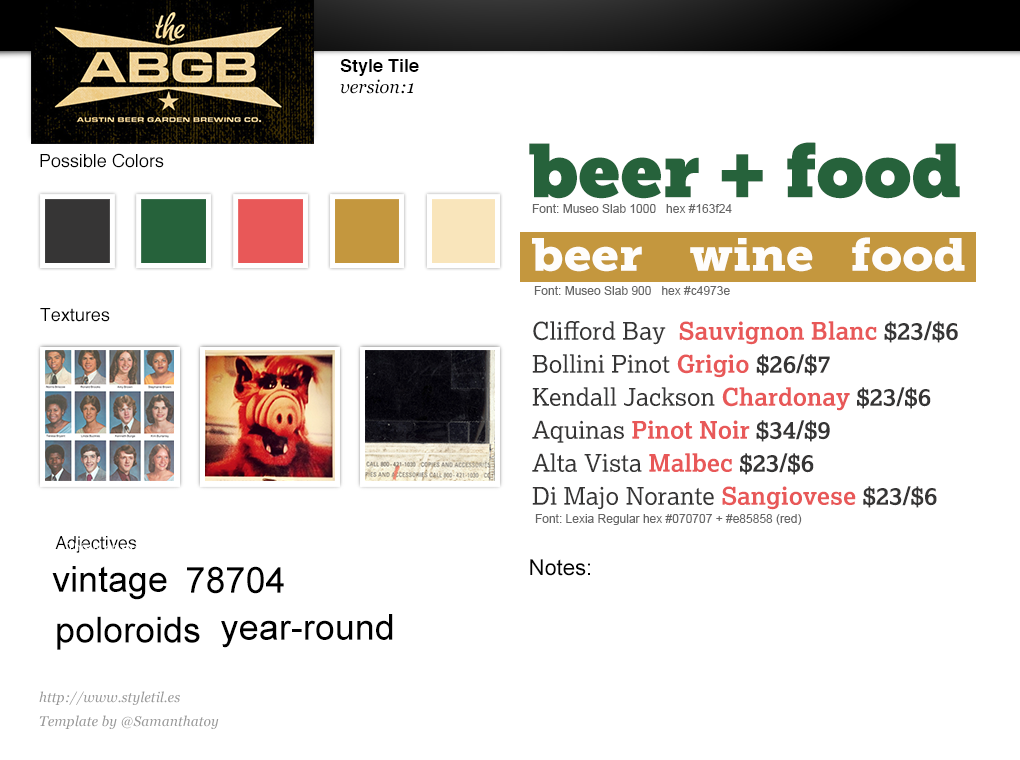
<style>
.page{position:relative;width:1020px;height:760px;background:#ffffff}
.page>*{position:absolute;margin:0}
.t1{font:18px "Helvetica-Bold";color:#000000}
.t2{font:18px "Georgia-Italic";color:#000000}
.t3{font:74.7px "MuseoSlab-1000";color:#26623b}
.t4{font:18px "Helvetica";color:#000000}
.t5{font:12px "ArialMT";color:#666666}
.t6{font:45.8px "MuseoSlab-900";color:#fefdfc;scale:1.08 1}
.t7{font:24.5px/33px "Lexia-Bold";color:#e85858}
.t8{font:24.5px/33px "Lexia-Regular";color:#363535}
.t9{font:24.5px/33px "Lexia-Bold";color:#363535}
.t10{font:36px "ArialMT";color:#000000}
.t11{font:22px "ArialMT";color:#020202}
.t12{font:14px/24px "Georgia-Italic";color:#999999}
</style>
<div class="page">
<p class="t1" style="left:340px;top:59px;width:79px;height:17px">Style Tile</p>
<p class="t2" style="left:340px;top:79px;width:74px;height:15px">version:1</p>
<p class="t3" style="left:529px;top:142px;width:431px;height:57px">beer + food</p>
<p class="t4" style="left:40px;top:153px;width:124px;height:15px">Possible Colors</p>
<p class="t5" style="left:532px;top:204px;width:200px;height:9px">Font: Museo Slab 1000   hex #163f24</p>
<p class="t6" style="left:532px;top:237px;width:433px;height:35px">beer   wine   food</p>
<p class="t5" style="left:534px;top:286px;width:196px;height:9px">Font: Museo Slab 900   hex #c4973e</p>
<p class="t4" style="left:40px;top:308px;width:70px;height:14px">Textures</p>
<p class="t7" style="left:532px;top:321px;width:426px;height:189px"><span class="t8">Clifford Bay  </span>Sauvignon Blanc <span class="t9">$23/$6<br></span><span class="t8">Bollini Pinot </span>Grigio <span class="t9">$26/$7<br></span><span class="t8">Kendall Jackson </span>Chardonay <span class="t9">$23/$6<br></span><span class="t8">Aquinas </span>Pinot Noir <span class="t9">$34/$9<br></span><span class="t8">Alta Vista </span>Malbec<span class="t9"> $23/$6<br></span><span class="t8">Di Majo Norante </span>Sangiovese <span class="t9">$23/$6</span></p>
<p class="t5" style="left:535px;top:514px;width:267px;height:11px">Font: Lexia Regular hex #070707 + #e85858 (red)</p>
<p class="t4" style="left:55px;top:536px;width:82px;height:17px">Adjectives</p>
<p class="t10" style="left:52px;top:566px;width:115px;height:34px">vintage</p>
<p class="t10" style="left:187px;top:566px;width:97px;height:28px">78704</p>
<p class="t11" style="left:530px;top:559px;width:60px;height:17px">Notes:</p>
<p class="t10" style="left:57px;top:616px;width:143px;height:34px">poloroids</p>
<p class="t10" style="left:221px;top:614px;width:172px;height:34px">year-round</p>
<p class="t12" style="left:39px;top:691px;width:180px;height:38px">http://www.styletil.es<br>Template by @Samanthatoy</p>
</div>
